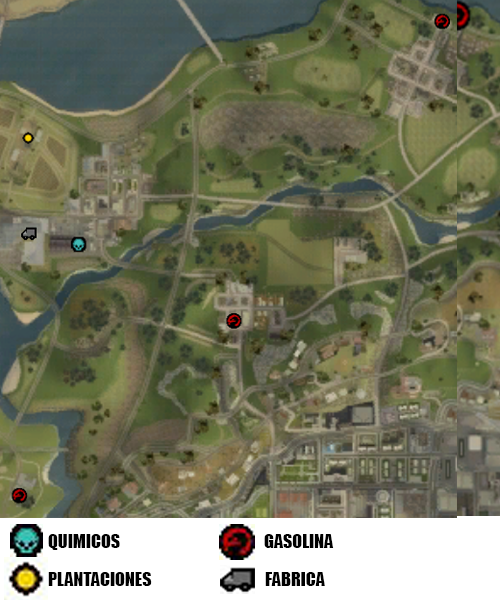
<style>
.page{position:relative;width:500px;height:600px}
.page>*{position:absolute;margin:0}
.t1{font:18px "Impact";color:#000000}
</style>
<div class="page">
<p class="t1" style="left:48px;top:534px;width:72px;height:16px">QUIMICOS</p>
<p class="t1" style="left:264px;top:534px;width:70px;height:14px">GASOLINA</p>
<p class="t1" style="left:48px;top:572px;width:104px;height:14px">PLANTACIONES</p>
<p class="t1" style="left:265px;top:572px;width:60px;height:14px">FABRICA</p>
</div>
